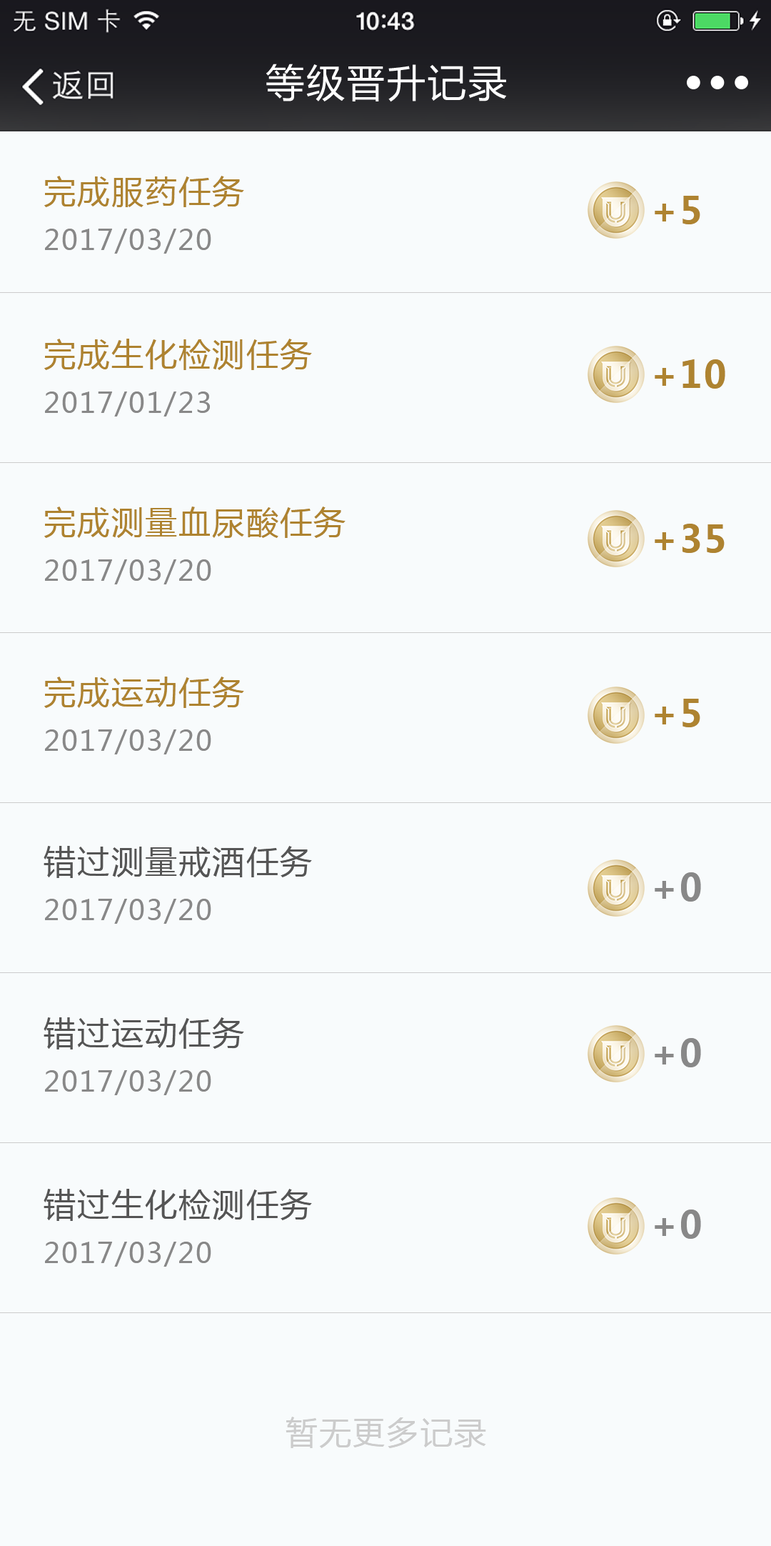
<style>
.page{position:relative;width:771px;height:1546px;background:#f8fbfc}
.page>*{position:absolute;margin:0}
.t1{font:27.9px/47.1px "MicrosoftYaHei";letter-spacing:0.05em;color:#888888}
.t2{font:32.1px/47.1px "MicrosoftYaHei";letter-spacing:0.05em;color:#ae8330}
.t3{font:36.4px "MicrosoftYaHei-Bold";letter-spacing:0.05em;color:#ae8330}
.t4{font:32.1px/47.1px "MicrosoftYaHei";letter-spacing:0.05em;color:#555555}
.t5{font:36.4px "MicrosoftYaHei-Bold";letter-spacing:0.05em;color:#888888}
.t6{font:32.1px "MicrosoftYaHei";letter-spacing:0.05em;color:#cccccc}
</style>
<div class="page">
<p class="t1" style="left:44px;top:176px;width:200px;height:78px;text-align:justify"><span class="t2">完成服药任务<br></span>2017/03/20</p>
<p class="t3" style="left:655px;top:196px;width:46px;height:28px">+5</p>
<p class="t1" style="left:44px;top:339px;width:268px;height:77px;text-align:justify"><span class="t2">完成生化检测任务<br></span>2017/01/23</p>
<p class="t3" style="left:655px;top:359px;width:71px;height:30px">+10</p>
<p class="t1" style="left:44px;top:506px;width:302px;height:78px;text-align:justify"><span class="t2">完成测量血尿酸任务<br></span>2017/03/20</p>
<p class="t3" style="left:655px;top:524px;width:70px;height:29px">+35</p>
<p class="t1" style="left:44px;top:676px;width:200px;height:78px;text-align:justify"><span class="t2">完成运动任务<br></span>2017/03/20</p>
<p class="t3" style="left:655px;top:699px;width:46px;height:28px">+5</p>
<p class="t1" style="left:44px;top:846px;width:268px;height:78px;text-align:justify"><span class="t4">错过测量戒酒任务<br></span>2017/03/20</p>
<p class="t5" style="left:655px;top:872px;width:46px;height:29px">+0</p>
<p class="t1" style="left:44px;top:1017px;width:200px;height:78px;text-align:justify"><span class="t4">错过运动任务<br></span>2017/03/20</p>
<p class="t5" style="left:655px;top:1038px;width:46px;height:29px">+0</p>
<p class="t1" style="left:44px;top:1189px;width:268px;height:77px;text-align:justify"><span class="t4">错过生化检测任务<br></span>2017/03/20</p>
<p class="t5" style="left:655px;top:1209px;width:46px;height:30px">+0</p>
<p class="t6" style="left:286px;top:1416px;width:200px;height:32px">暂无更多记录</p>
</div>
